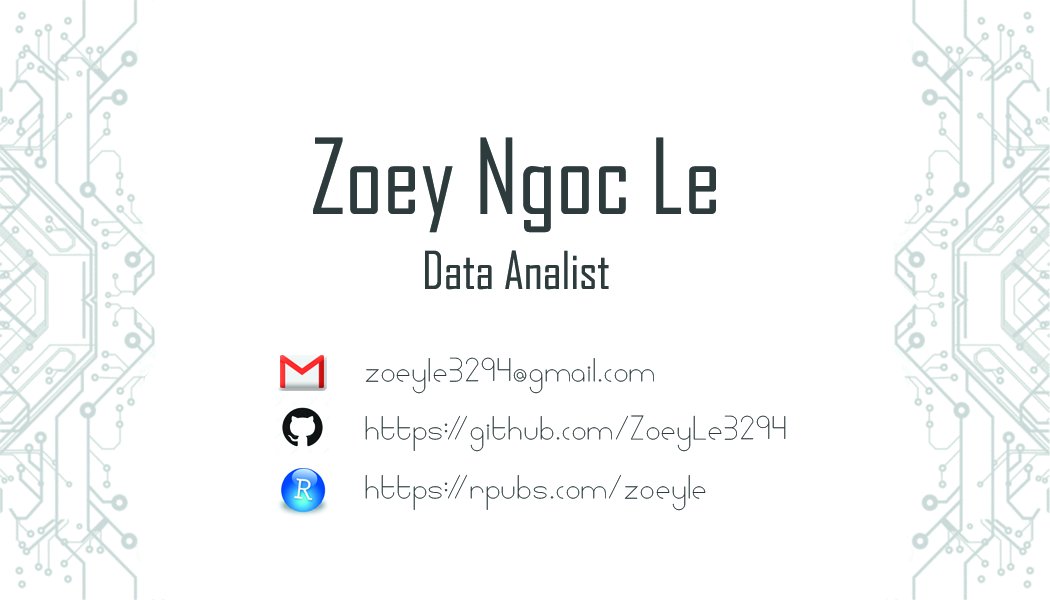
<style>
.page{position:relative;width:1050px;height:600px;background:#ffffff}
.page>*{position:absolute;margin:0}
.t1{font:100px/75px "AgencyFB-Reg";color:#2e3b3c}
.t2{font:50px/75px "AgencyFB-Reg";color:#2e3b3c}
.t3{font:41.7px/58.3px "Linlegreyregular";color:#2e3b3c}
</style>
<div class="page">
<p class="t1" style="left:313px;top:137px;width:403px;height:153px;text-align:center">Zoey Ngoc Le<br><span class="t2">Data Analist</span></p>
<p class="t3" style="left:365px;top:357px;width:421px;height:154px">zoeyle3294@gmail.com<br>https://github.com/ZoeyLe3294<br>https://rpubs.com/zoeyle</p>
</div>
